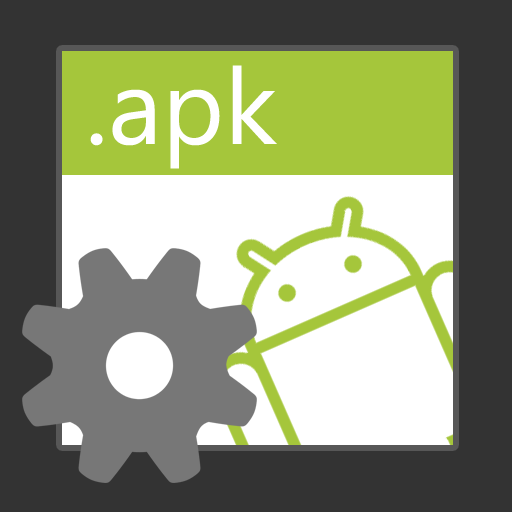
<style>
.page{position:relative;width:512px;height:512px;background:#333333}
.page>*{position:absolute;margin:0}
.t1{font:106px "SegoeUI";color:#ffffff}
</style>
<div class="page">
<p class="t1" style="left:90px;top:65px;width:187px;height:104px">.apk</p>
</div>
